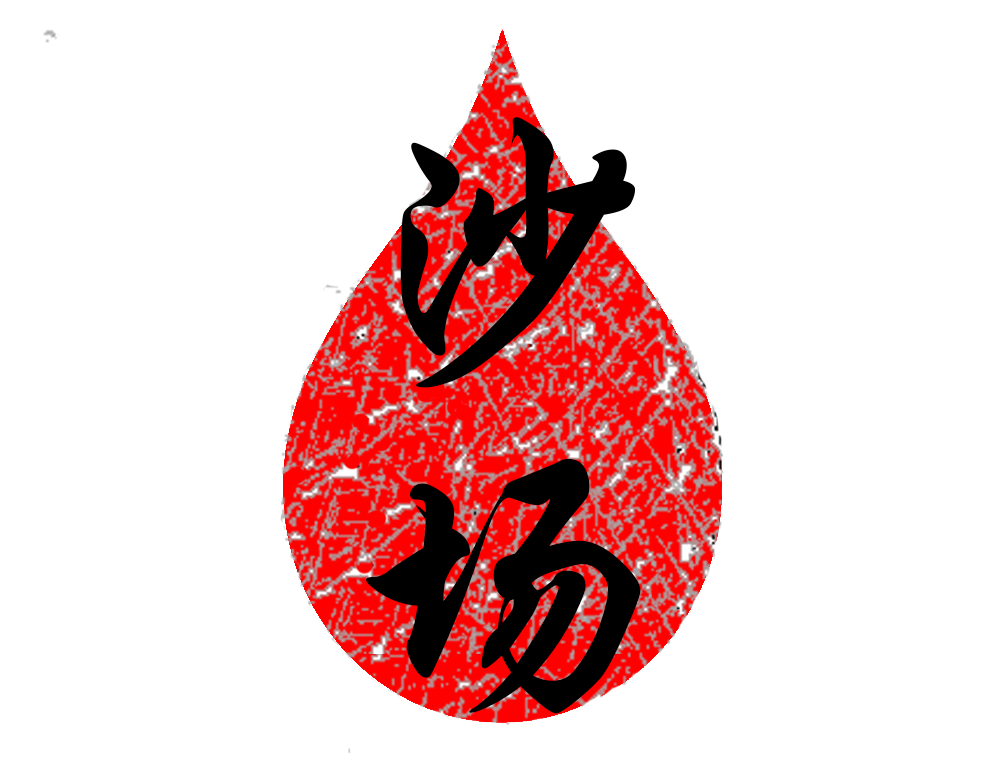
<style>
.page{position:relative;width:1006px;height:780px;background:#ffffff}
.page>*{position:absolute;margin:0}
.t1{font:321px "STXingkai";color:#000000}
</style>
<div class="page">
<p class="t1" style="left:366px;top:117px;width:275px;height:597px">沙场</p>
</div>
